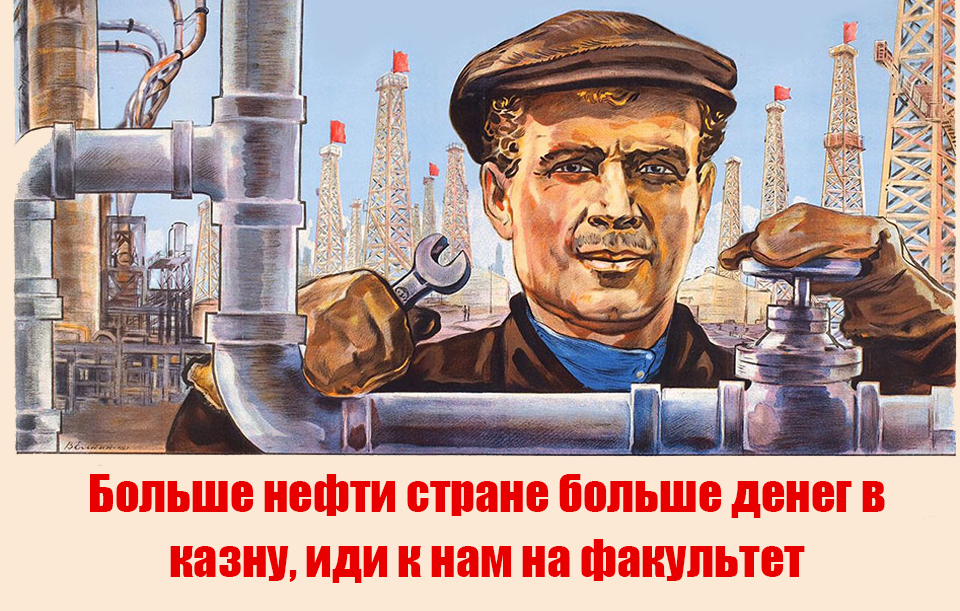
<style>
.page{position:relative;width:960px;height:611px;background:#fbe9d5}
.page>*{position:absolute;margin:0}
.t1{font:48px/65px "Impact";color:#e80000}
</style>
<div class="page">
<p class="t1" style="left:90px;top:474px;width:795px;height:109px;text-align:center">Больше нефти стране больше денег в <br>казну, иди к нам на факультет</p>
</div>
